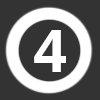
<style>
.page{position:relative;width:100px;height:100px;background:#333333}
.page>*{position:absolute;margin:0}
.t1{font:60px "SegoeUI-Bold";letter-spacing:-0.105em;color:#ffffff}
</style>
<div class="page">
<p class="t1" style="left:34px;top:30px;width:32px;height:42px">4</p>
</div>
